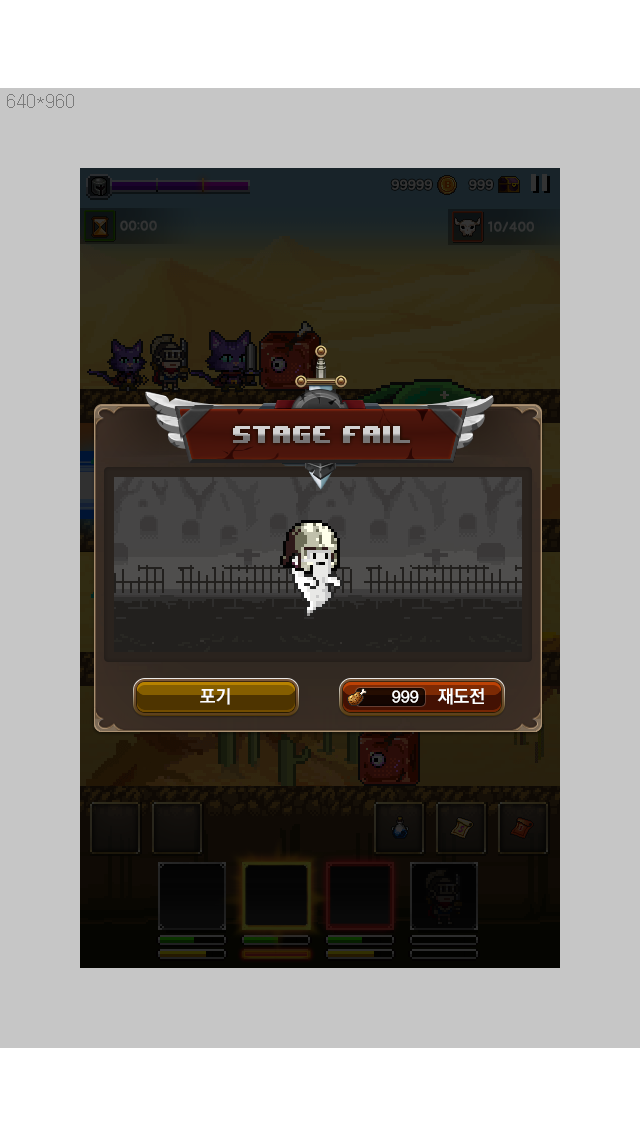
<style>
.page{position:relative;width:640px;height:1136px;background:#c6c6c6}
.page>*{position:absolute;margin:0}
.t1{font:20px "8BITWONDERNominal"}
.t2{font:18px "KoPubDotumBold";color:#ffffff}
.t3{font:16px "KoPubDotumBold";color:#ffffff}
</style>
<div class="page">
<p class="t1" style="left:233px;top:426px;width:177px;height:17px">stage fail</p>
<p class="t2" style="left:200px;top:688px;width:30px;height:17px">포기</p>
<p class="t2" style="left:437px;top:688px;width:47px;height:17px">재도전</p>
<p class="t3" style="left:392px;top:690px;width:27px;height:13px">999</p>
</div>
